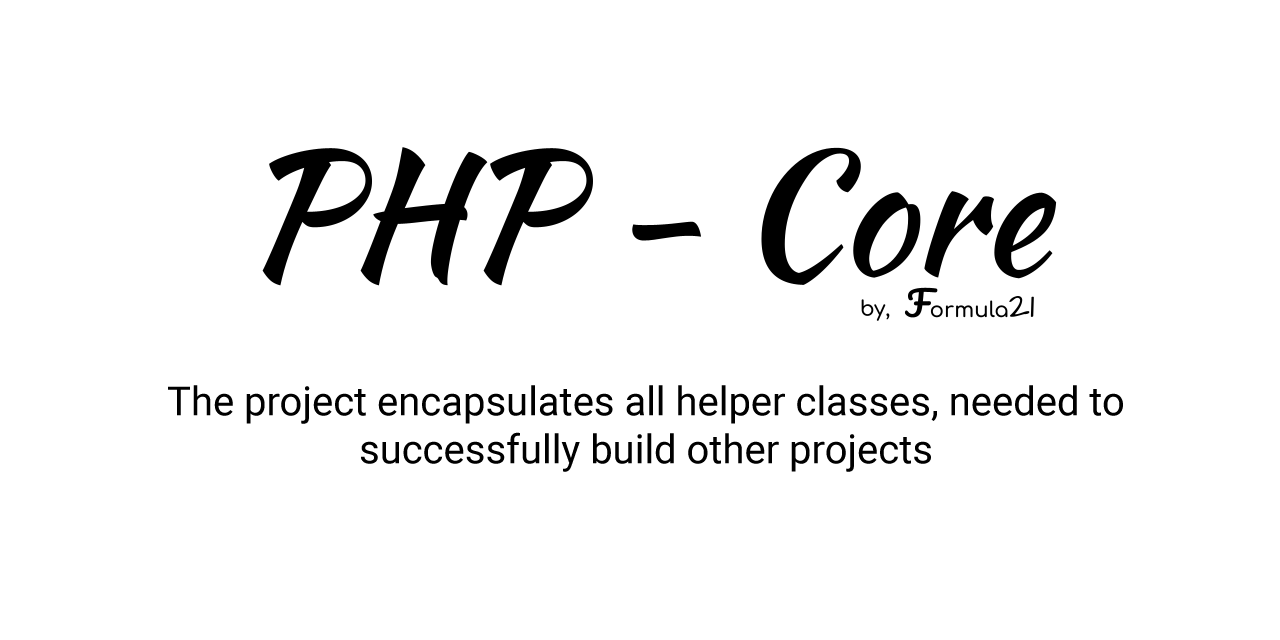
<style>
.page{position:relative;width:1280px;height:640px;background:#ffffff}
.page>*{position:absolute;margin:0}
.t1{font:40px "Roboto-Regular";color:#000000}
</style>
<div class="page">
<p class="t1" style="left:168px;top:385px;width:955px;height:87px;text-align:center">The project encapsulates all helper classes, needed to<br>successfully build other projects</p>
</div>
